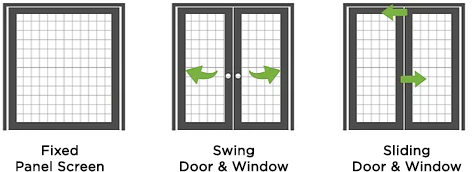
<style>
.page{position:relative;width:472px;height:172px;background:#ffffff}
.page>*{position:absolute;margin:0}
.t1{font:13.3px "Gotham-Book";color:#000000;font-weight:bold}
</style>
<div class="page">
<p class="t1" style="left:16px;top:145px;width:88px;height:27px;text-align:center">Fixed<br>Panel Screen</p>
<p class="t1" style="left:180px;top:145px;width:109px;height:27px;text-align:center">Swing<br>Door &amp; Window</p>
<p class="t1" style="left:353px;top:145px;width:109px;height:27px;text-align:center">Sliding<br>Door &amp; Window</p>
</div>
